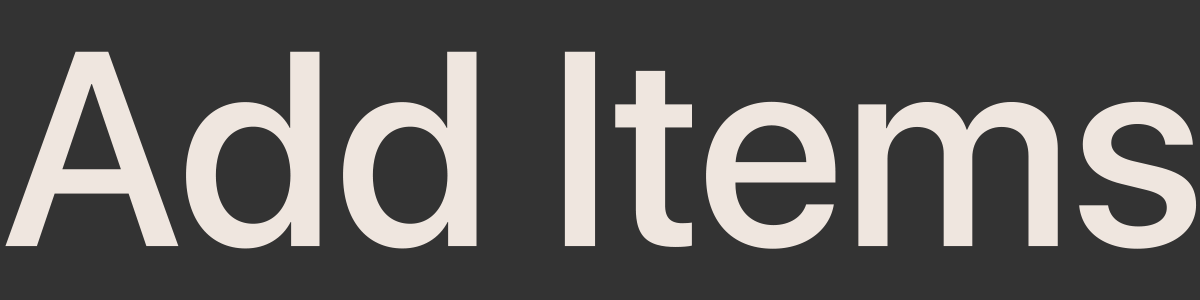
<style>
.page{position:relative;width:1200px;height:300px;background:#333333}
.page>*{position:absolute;margin:0}
.t1{font:275.6px "SFProDisplay-Medium";color:#efe6df}
</style>
<div class="page">
<p class="t1" style="left:5px;top:51px;width:1192px;height:198px">Add Items</p>
</div>
